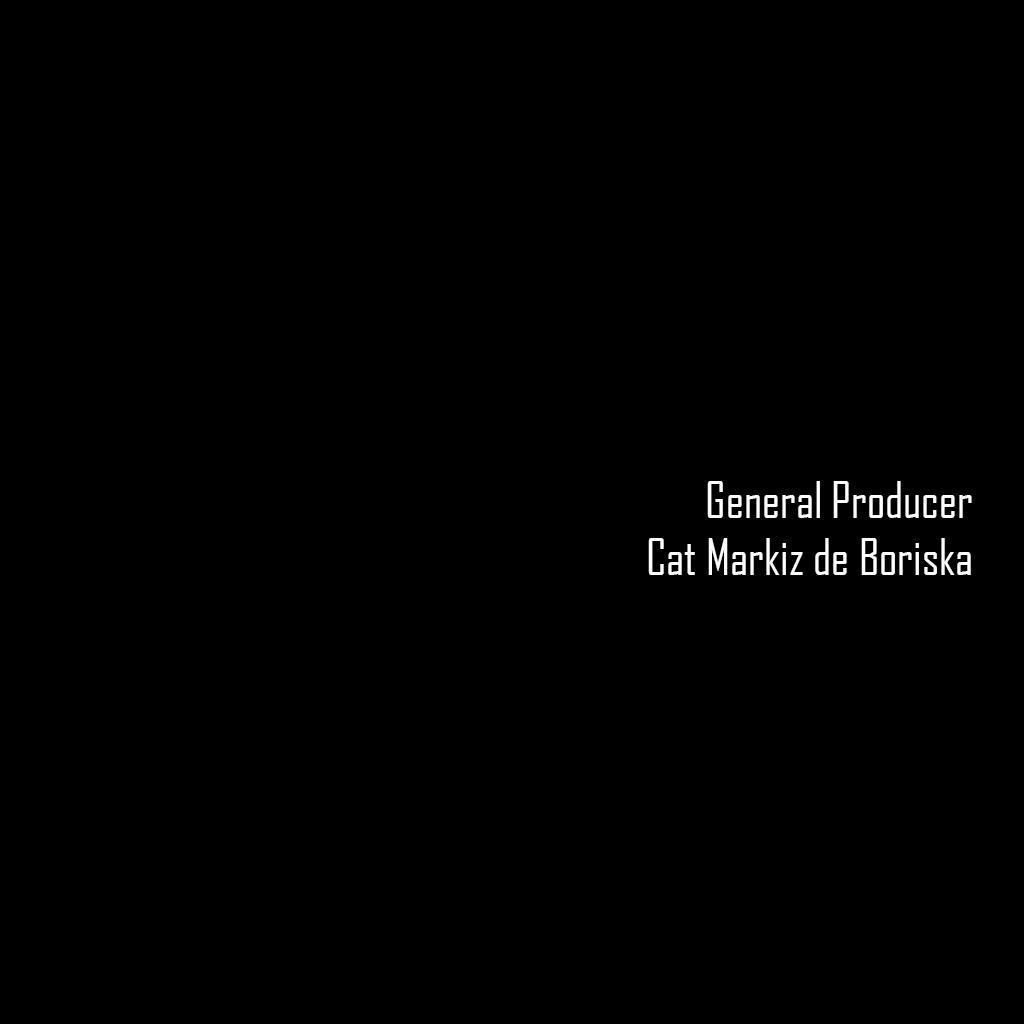
<style>
.page{position:relative;width:1024px;height:1024px;background:#000000}
.page>*{position:absolute;margin:0}
.t1{font:48px "AgencyFBCyrillic";color:#ffffff}
</style>
<div class="page">
<p class="t1" style="left:648px;top:481px;width:324px;height:94px;text-align:right">General Producer<br>Cat Markiz de Boriska</p>
</div>
